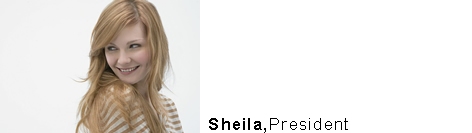
<style>
.page{position:relative;width:472px;height:133px;background:#ffffff}
.page>*{position:absolute;margin:0}
.t1{font:12px "ArialMT";letter-spacing:0.075em;color:#000000}
.t2{font:12px "Arial-BoldMT";letter-spacing:0.075em;color:#000000}
</style>
<div class="page">
<p class="t1" style="left:209px;top:118px;width:139px;height:15px"><span class="t2">Sheila,</span>President</p>
</div>
